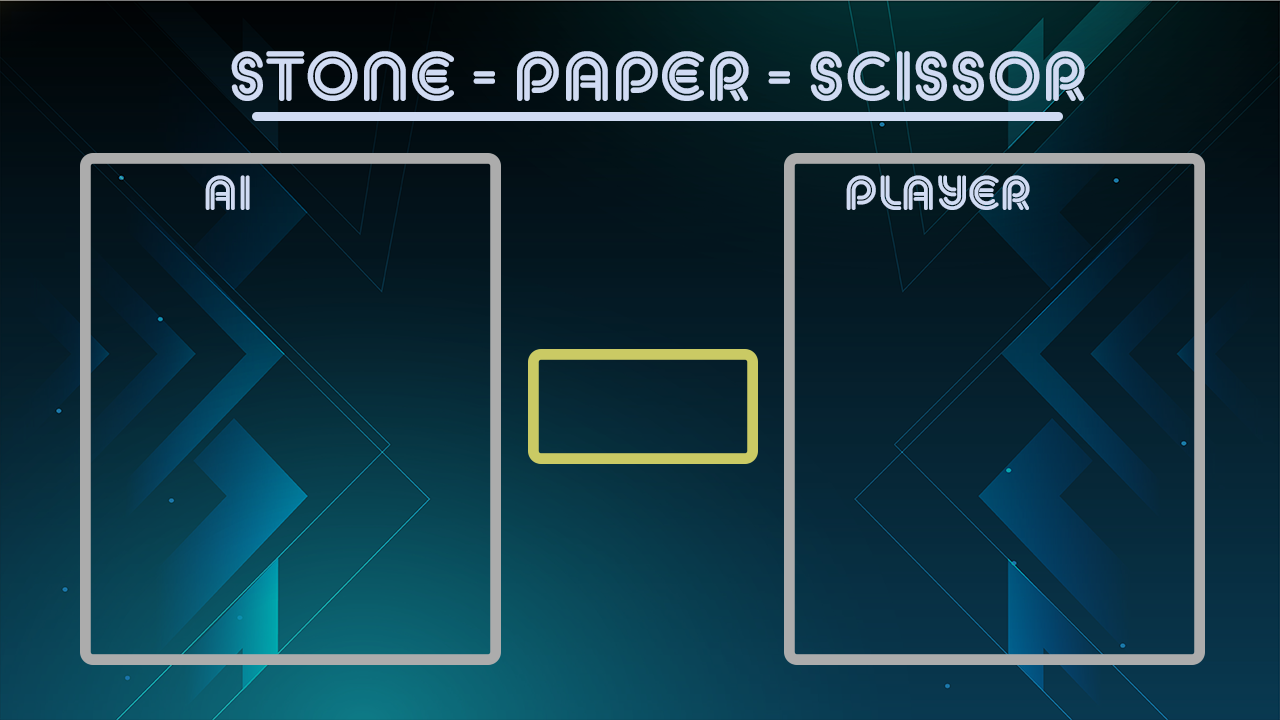
<style>
.page{position:relative;width:1280px;height:720px}
.page>*{position:absolute;margin:0}
.t1{font:69.3px "MACCOSDOUBLEDemo";color:#d0dbf3}
.t2{font:48px "MACCOSDOUBLEDemo";color:#d0dbf3}
</style>
<div class="page">
<p class="t1" style="left:231px;top:51px;width:854px;height:50px">Stone - Paper - Scissor</p>
<p class="t2" style="left:205px;top:175px;width:45px;height:35px">AI</p>
<p class="t2" style="left:846px;top:175px;width:184px;height:35px">Player</p>
</div>
